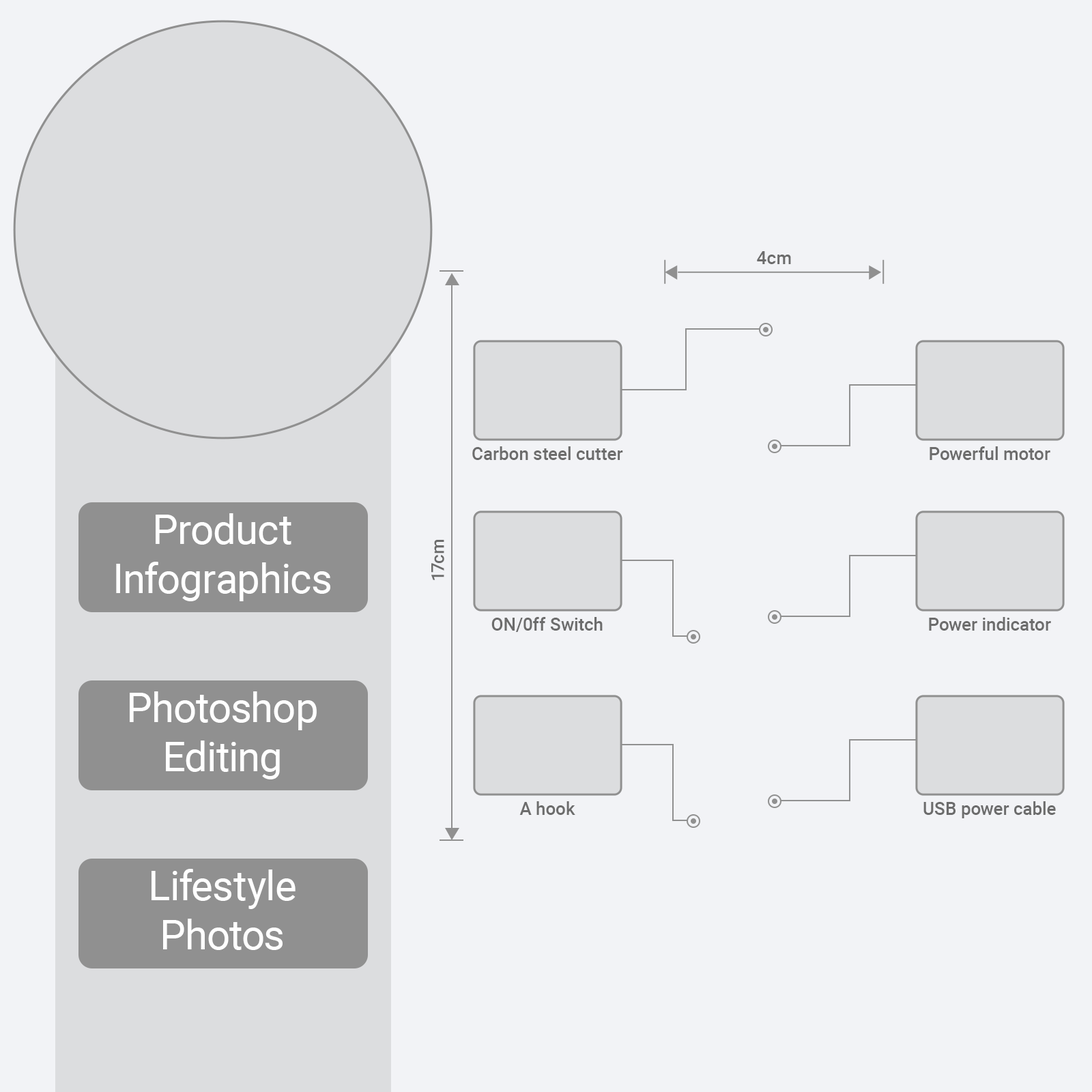
<style>
.page{position:relative;width:1092px;height:1092px;background:#f2f3f6}
.page>*{position:absolute;margin:0}
.t1{font:17.7px "Roboto-Medium";color:#6c6c6c}
.t2{font:40.9px "Roboto-Regular";color:#ffffff}
</style>
<div class="page">
<p class="t1" style="left:757px;top:251px;width:34px;height:13px">4cm</p>
<p class="t1" style="left:472px;top:446px;width:151px;height:14px">Carbon steel cutter</p>
<p class="t1" style="left:930px;top:446px;width:120px;height:14px">Powerful motor</p>
<p class="t2" style="left:116px;top:513px;width:214px;height:88px;text-align:center">Product<br>Infographics</p>
<p class="t1" style="left:431px;top:540px;width:13px;height:40px;rotate:-90deg">17cm</p>
<p class="t1" style="left:491px;top:617px;width:112px;height:15px">ON/0ff Switch</p>
<p class="t1" style="left:929px;top:617px;width:122px;height:14px">Power indicator</p>
<p class="t2" style="left:130px;top:691px;width:187px;height:88px;text-align:center">Photoshop<br>Editing</p>
<p class="t1" style="left:519px;top:801px;width:56px;height:14px">A hook</p>
<p class="t1" style="left:923px;top:801px;width:133px;height:17px">USB power cable</p>
<p class="t2" style="left:152px;top:869px;width:144px;height:81px;text-align:center">Lifestyle<br>Photos</p>
</div>
